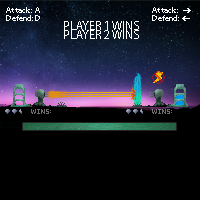
<style>
.page{position:relative;width:200px;height:200px;background:#000000}
.page>*{position:absolute;margin:0}
.t1{font:8.3px/8.3px "MyriadPro-Regular";color:#fffffe}
.t2{font:12.5px "MyriadPro-Regular";color:#ffffff}
</style>
<div class="page">
<p class="t1" style="left:6px;top:7px;width:34px;height:14px">Attack::  A<br>Defend: D</p>
<p class="t1" style="left:152px;top:7px;width:27px;height:14px">Attack::  <br>Defend:</p>
<p class="t2" style="left:64px;top:21px;width:75px;height:9px">PLAYER 1 WINS</p>
<p class="t2" style="left:64px;top:30px;width:75px;height:9px">PLAYER 2 WINS</p>
</div>
